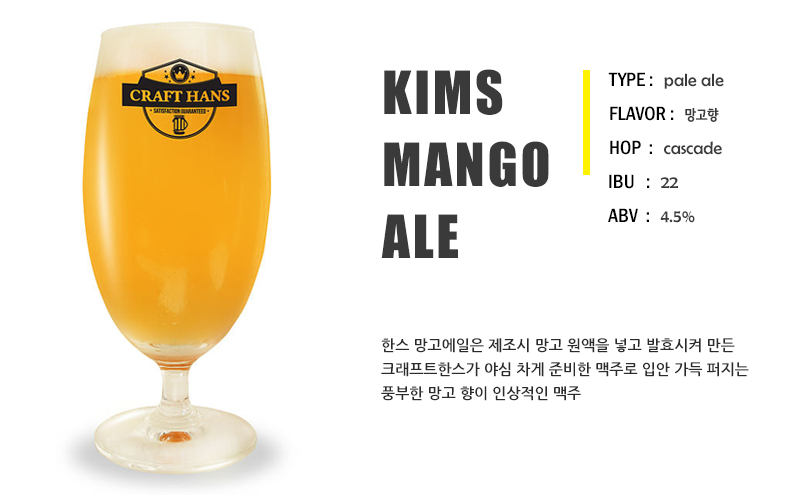
<style>
.page{position:relative;width:800px;height:500px;background:#ffffff}
.page>*{position:absolute;margin:0}
.t1{font:55px/72px "Impact";letter-spacing:0.05em;color:#3a3a3a}
.t2{font:18px "BerlinSansFB-Reg";color:#3a3a3a}
.t3{font:20px "FranklinGothic-MediumCond";color:#000000}
.t4{font:14px "SeN-CBL";color:#3a3a3a}
.t5{font:15px/24px "NanumGothicBold";color:#2b2b2b}
</style>
<div class="page">
<p class="t1" style="left:381px;top:69px;width:168px;height:189px">KIMS<br>MANGO<br>ALE</p>
<p class="t2" style="left:608px;top:72px;width:116px;height:17px"><span class="t3">TYPE :  </span>pale ale</p>
<p class="t3" style="left:610px;top:106px;width:109px;height:16px">FLAVOR :  <span class="t4">망고향</span></p>
<p class="t2" style="left:610px;top:140px;width:112px;height:15px"><span class="t3">HOP  :  </span>cascade</p>
<p class="t3" style="left:609px;top:174px;width:69px;height:15px">IBU   :  <span class="t2">22</span></p>
<p class="t3" style="left:608px;top:208px;width:87px;height:15px">ABV  :  <span class="t2">4.5%</span></p>
<p class="t5" style="left:381px;top:338px;width:368px;height:63px">한스 망고에일은 제조시 망고 원액을 넣고 발효시켜 만든 <br>크래프트한스가 야심 차게 준비한 맥주로 입안 가득 퍼지는 <br>풍부한 망고 향이 인상적인 맥주</p>
</div>
